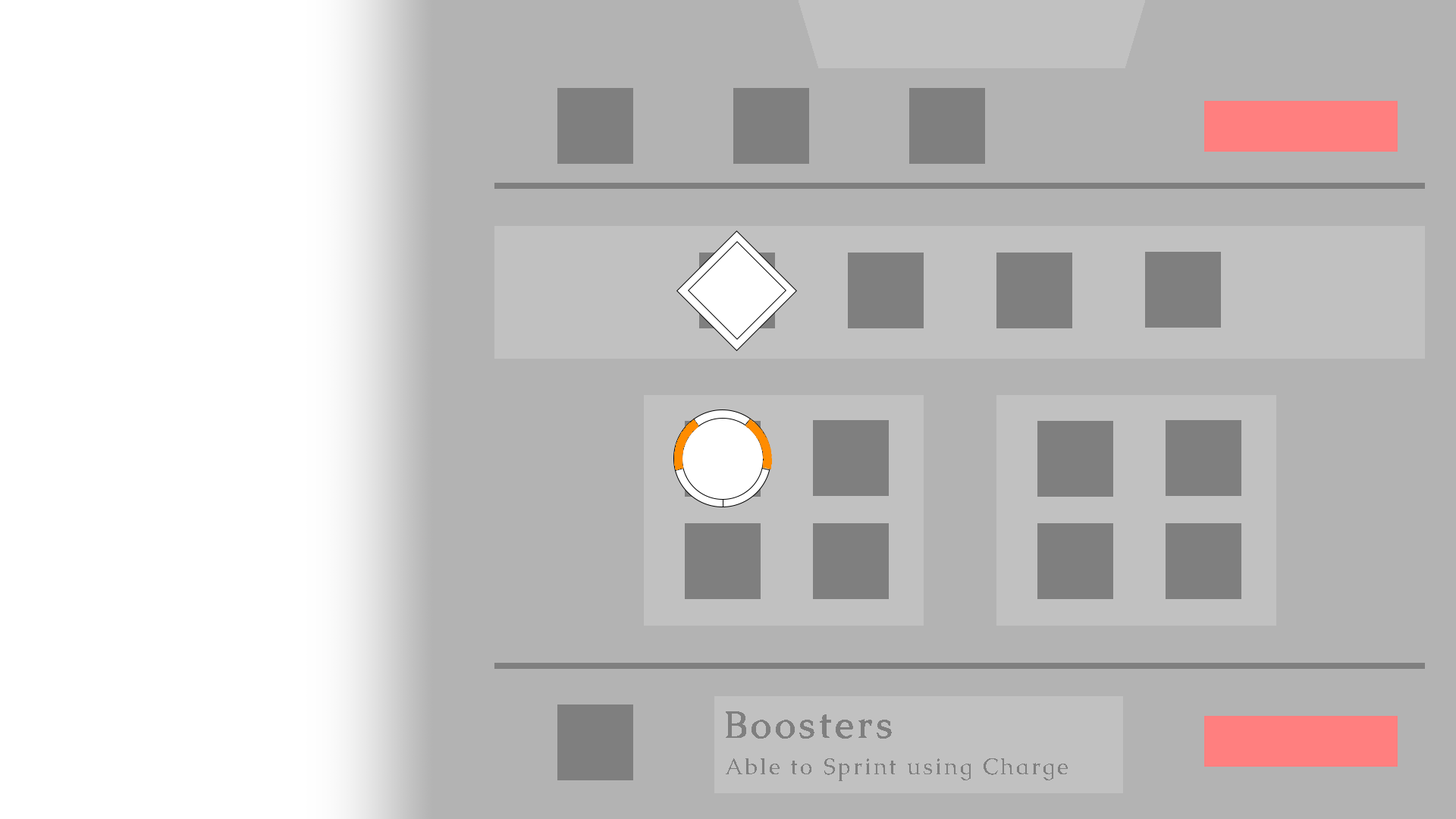
<style>
.page{position:relative;width:1456px;height:819px;background:#b3b3b3}
.page>*{position:absolute;margin:0}
.t1{font:37.6px "Caudex-Bold";letter-spacing:0.1em;color:#7f7f7f}
.t2{font:22.7px "Caudex";letter-spacing:0.1em;color:#7f7f7f}
</style>
<div class="page">
<p class="t1" style="left:726px;top:711px;width:166px;height:28px">Boosters</p>
<p class="t2" style="left:726px;top:758px;width:342px;height:23px">Able to Sprint using Charge</p>
</div>
